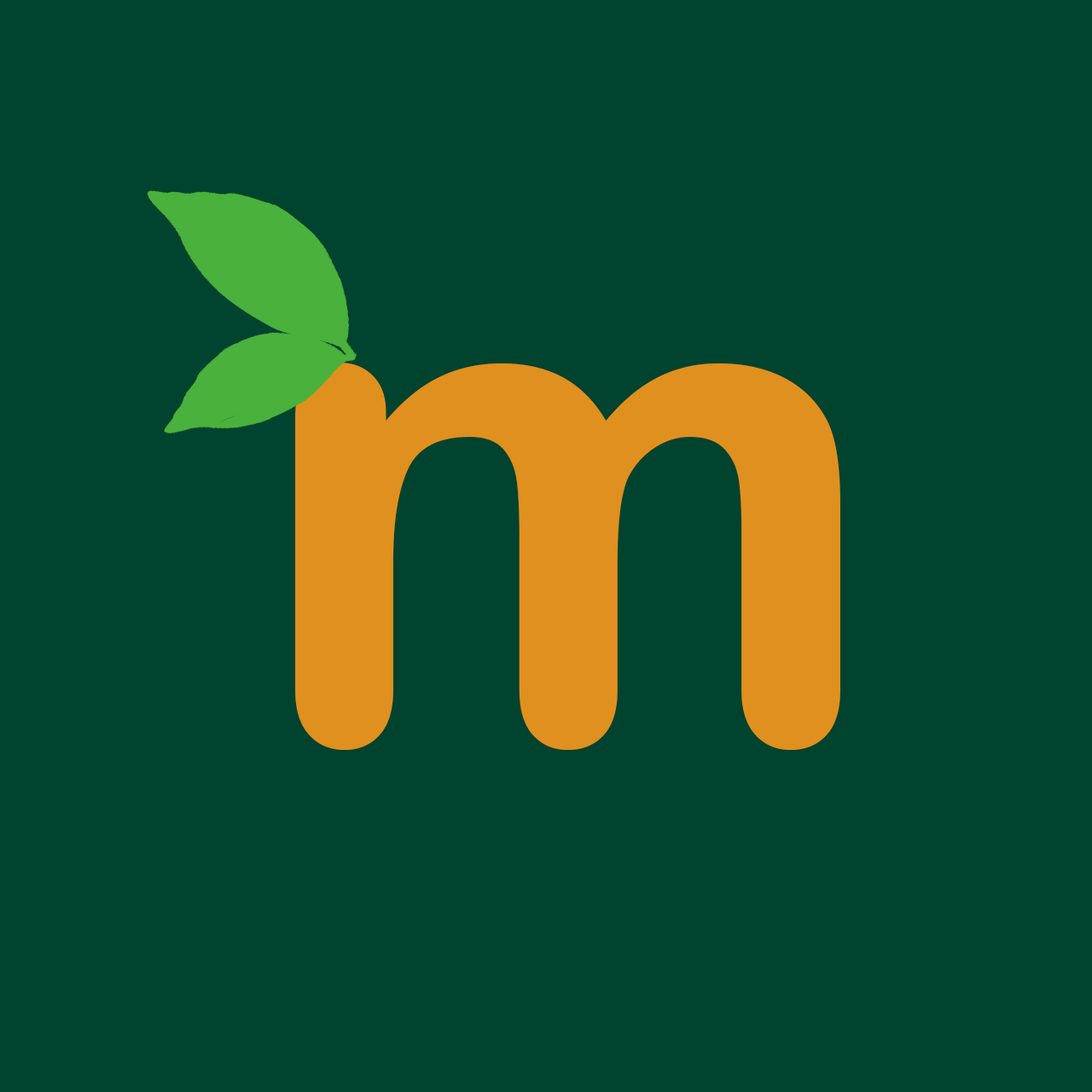
<style>
.page{position:relative;width:1092px;height:1092px;background:#00432e}
.page>*{position:absolute;margin:0}
.t1{font:713.8px "ArialRoundedMTBold";color:#e0901e}
</style>
<div class="page">
<p class="t1" style="left:295px;top:363px;width:545px;height:387px">m</p>
</div>
